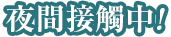
<style>
.page{position:relative;width:171px;height:37px;background:#2a747e}
.page>*{position:absolute;margin:0}
.t1{font:30px "RyuminPro-ExBold";color:#ffffff}
.t2{font:30px "RyuminPro-ExBold";color:#ffffff;font-style:italic}
</style>
<div class="page">
<p class="t1" style="left:6px;top:4px;width:159px;height:29px">夜間接觸中<span class="t2">!</span></p>
</div>
